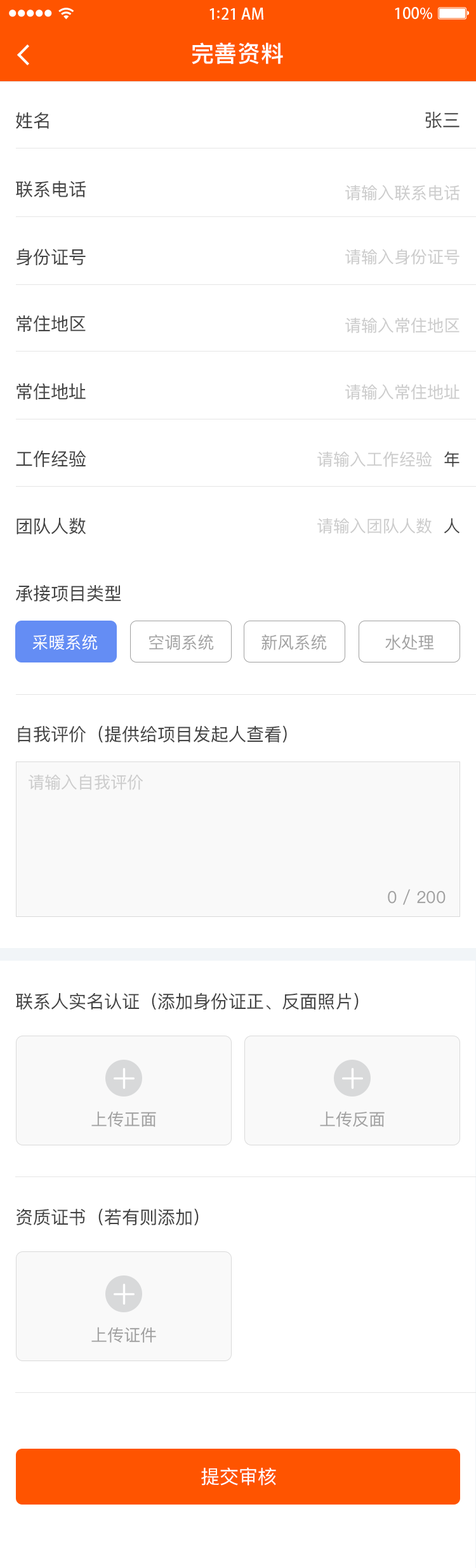
<style>
.page{position:relative;width:476px;height:1568px;background:#ffffff}
.page>*{position:absolute;margin:0}
.t1{font:22.8px "PingFangSC-Medium";letter-spacing:0.02em;color:#ffffff}
.t2{font:17.8px "PingFangSC-Regular";color:#434343}
.t3{font:16.5px "PingFangSC-Regular";color:#cccccc}
.t4{font:16.5px "PingFangSC-Regular";color:#434343}
.t5{font:16.5px "PingFangSC-Regular";color:#ffffff;text-transform:uppercase}
.t6{font:16.5px "PingFangSC-Regular";color:#a0a0a0;text-transform:uppercase}
.t7{font:16.5px "PingFangSC-Regular";color:#a0a0a0}
.t8{font:19px "PingFangSC-Regular";color:#ffffff;text-transform:uppercase}
</style>
<div class="page">
<p class="t1" style="left:192px;top:43px;width:91px;height:21px">完善资料</p>
<p class="t2" style="left:16px;top:112px;width:33px;height:17px">姓名</p>
<p class="t2" style="left:425px;top:112px;width:34px;height:16px">张三</p>
<p class="t2" style="left:16px;top:181px;width:70px;height:17px">联系电话</p>
<p class="t3" style="left:345px;top:185px;width:115px;height:16px">请输入联系电话</p>
<p class="t2" style="left:16px;top:248px;width:70px;height:17px">身份证号</p>
<p class="t3" style="left:345px;top:249px;width:114px;height:16px">请输入身份证号</p>
<p class="t2" style="left:16px;top:315px;width:70px;height:17px">常住地区</p>
<p class="t3" style="left:345px;top:317px;width:114px;height:16px">请输入常住地区</p>
<p class="t2" style="left:16px;top:383px;width:70px;height:17px">常住地址</p>
<p class="t3" style="left:345px;top:384px;width:114px;height:16px">请输入常住地址</p>
<p class="t2" style="left:16px;top:451px;width:70px;height:16px">工作经验</p>
<p class="t3" style="left:317px;top:451px;width:115px;height:16px">请输入工作经验</p>
<p class="t4" style="left:444px;top:451px;width:15px;height:16px">年</p>
<p class="t2" style="left:16px;top:518px;width:70px;height:16px">团队人数</p>
<p class="t3" style="left:317px;top:518px;width:115px;height:16px">请输入团队人数</p>
<p class="t4" style="left:444px;top:518px;width:15px;height:16px">人</p>
<p class="t2" style="left:16px;top:585px;width:105px;height:17px">承接项目类型</p>
<p class="t5" style="left:32px;top:635px;width:66px;height:15px">采暖系统</p>
<p class="t6" style="left:149px;top:635px;width:65px;height:15px">空调系统</p>
<p class="t6" style="left:261px;top:635px;width:66px;height:15px">新风系统</p>
<p class="t6" style="left:385px;top:635px;width:49px;height:15px">水处理</p>
<p class="t2" style="left:18px;top:725px;width:269px;height:18px">自我评价（提供给项目发起人查看)</p>
<p class="t3" style="left:29px;top:774px;width:114px;height:16px">请输入自我评价</p>
<p class="t7" style="left:388px;top:889px;width:57px;height:16px">0 / 200</p>
<p class="t2" style="left:16px;top:992px;width:343px;height:18px">联系人实名认证（添加身份证正、反面照片）</p>
<p class="t7" style="left:91px;top:1111px;width:65px;height:16px">上传正面</p>
<p class="t7" style="left:320px;top:1111px;width:65px;height:16px">上传反面</p>
<p class="t2" style="left:16px;top:1208px;width:183px;height:18px">资质证书（若有则添加）</p>
<p class="t7" style="left:91px;top:1327px;width:65px;height:16px">上传证件</p>
<p class="t8" style="left:201px;top:1467px;width:75px;height:19px">提交审核</p>
</div>
